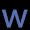
<style>
.page{position:relative;width:30px;height:30px;background:#000000}
.page>*{position:absolute;margin:0}
.t1{font:36px "MyriadPro-Regular";color:#5972b4}
</style>
<div class="page">
<p class="t1" style="left:2px;top:9px;width:26px;height:19px">w</p>
</div>
